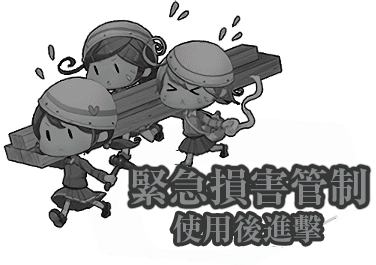
<style>
.page{position:relative;width:376px;height:265px;background:#ffffff}
.page>*{position:absolute;margin:0}
.t1{font:40px "RyuminPr6N-ExBold";color:#868a8a}
.t2{font:30px "RyuminPr6N-ExBold";color:#868a8a}
</style>
<div class="page">
<p class="t1" style="left:131px;top:168px;width:236px;height:38px">緊急損害管制</p>
<p class="t2" style="left:173px;top:214px;width:148px;height:29px">使用後進擊</p>
</div>
